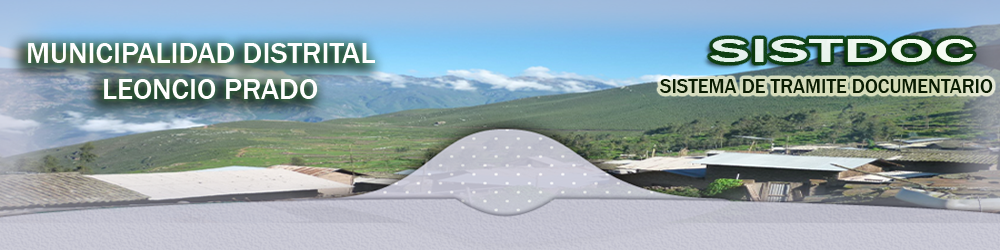
<style>
.page{position:relative;width:1000px;height:250px}
.page>*{position:absolute;margin:0}
.t1{font:33.6px "FranklinGothic-Medium";color:#fffefe;scale:2.09 1}
.t2{font:30px "FranklinGothic-Medium";color:#fffefe}
.t3{font:20px "FranklinGothic-Medium";color:#091b02}
</style>
<div class="page">
<p class="t1" style="left:710px;top:39px;width:263px;height:23px">SISTDOC</p>
<p class="t2" style="left:28px;top:43px;width:347px;height:56px;text-align:center">MUNICIPALIDAD DISTRITAL  <br>LEONCIO PRADO</p>
<p class="t3" style="left:660px;top:79px;width:333px;height:14px">SISTEMA DE TRAMITE DOCUMENTARIO</p>
</div>
